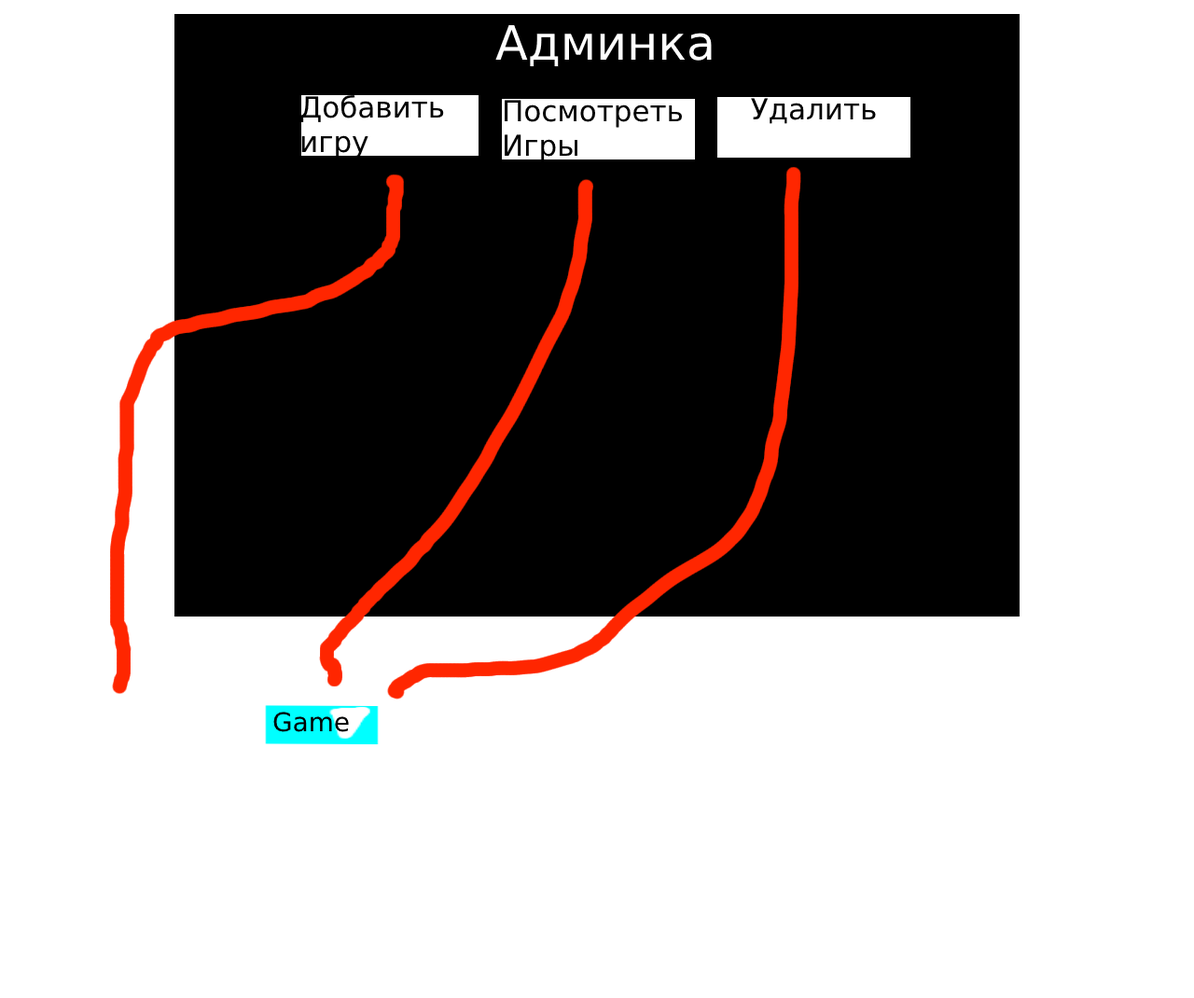
<style>
.page{position:relative;width:1194px;height:998px;background:#ffffff}
.page>*{position:absolute;margin:0}
.t1{font:47.4px "DejaVuSans";color:#ffffff}
.t2{font:28.9px "DejaVuSans";color:#000000}
.t3{font:26px "DejaVuSans";color:#000000}
</style>
<div class="page">
<p class="t1" style="left:495px;top:25px;width:217px;height:42px">Админка</p>
<p class="t2" style="left:300px;top:94px;width:144px;height:65px">Добавить<br>игру</p>
<p class="t2" style="left:505px;top:100px;width:177px;height:62px">Посмотреть<br>Игры</p>
<p class="t3" style="left:273px;top:712px;width:76px;height:20px">Game</p>
</div>
